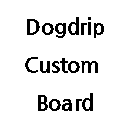
<style>
.page{position:relative;width:128px;height:128px;background:#ffffff}
.page>*{position:absolute;margin:0}
.t1{font:21.8px "NanumGothicExtraBold";color:#000000}
</style>
<div class="page">
<p class="t1" style="left:25px;top:17px;width:79px;height:94px;text-align:center">Dogdrip<br>Custom <br>Board</p>
</div>
